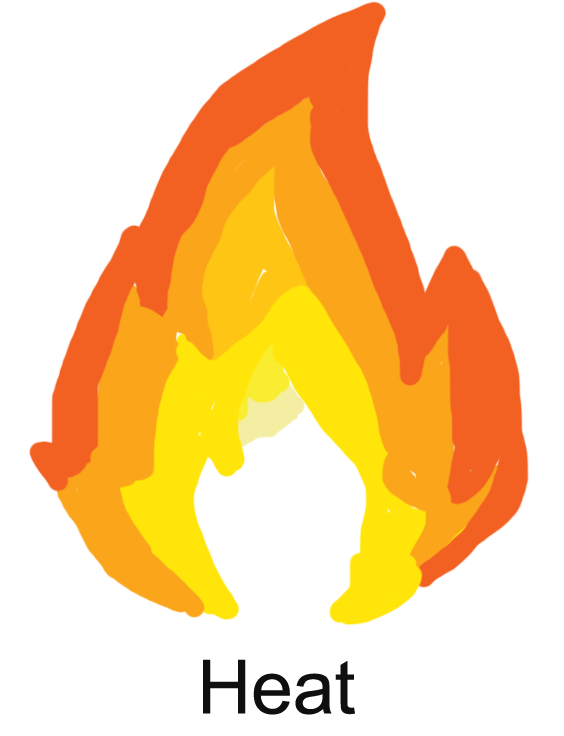
<style>
.page{position:relative;width:564px;height:736px;background:#ffffff}
.page>*{position:absolute;margin:0}
.t1{font:75px "ArialMT";color:#0f0f0f}
</style>
<div class="page">
<p class="t1" style="left:203px;top:659px;width:152px;height:56px">Heat</p>
</div>
